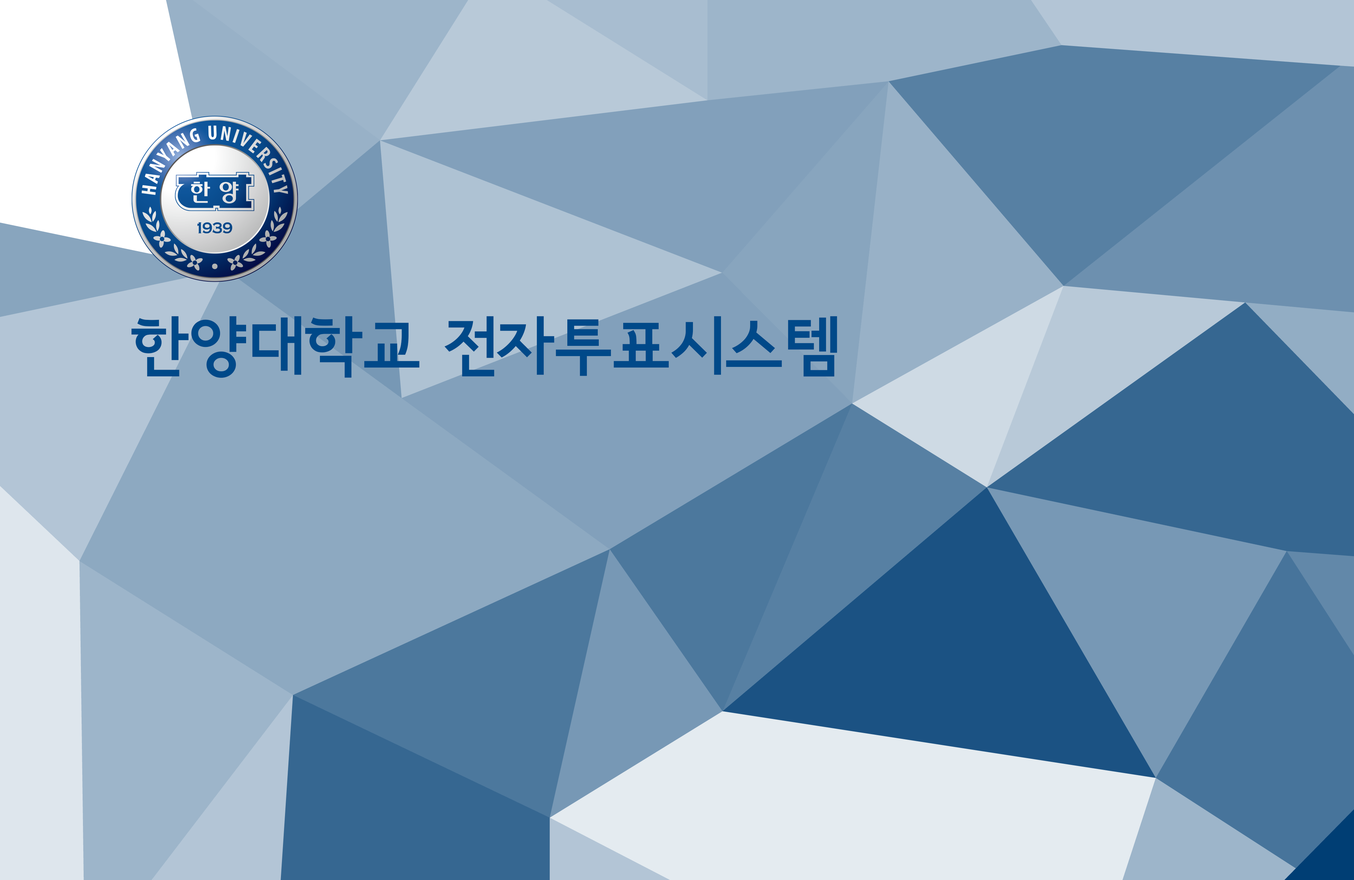
<style>
.page{position:relative;width:1354px;height:880px}
.page>*{position:absolute;margin:0}
.t1{font:64.3px "SeoulNamsanEB";color:#004989}
</style>
<div class="page">
<p class="t1" style="left:131px;top:316px;width:706px;height:62px">한양대학교 전자투표시스템</p>
</div>
